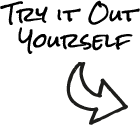
<style>
.page{position:relative;width:140px;height:125px;background:#ffffff}
.page>*{position:absolute;margin:0}
.t1{font:20px/26px "RockSalt";color:#000000;font-weight:bold}
</style>
<div class="page">
<p class="t1" style="left:0px;top:0px;width:140px;height:54px;text-align:center">Try it Out <br>Yourself</p>
</div>
